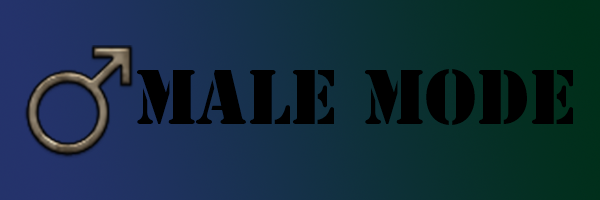
<style>
.page{position:relative;width:600px;height:200px}
.page>*{position:absolute;margin:0}
.t1{font:72px "StencilStd";color:#000000}
</style>
<div class="page">
<p class="t1" style="left:137px;top:69px;width:436px;height:56px">Male mode</p>
</div>
